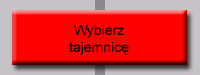
<style>
.page{position:relative;width:200px;height:75px;background:#ff0000}
.page>*{position:absolute;margin:0}
.t1{font:14px "ArialMT";color:#000000}
</style>
<div class="page">
<p class="t1" style="left:69px;top:25px;width:60px;height:30px;text-align:center">Wybierz<br>tajemnicę</p>
</div>
